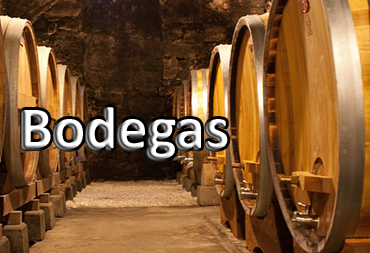
<style>
.page{position:relative;width:370px;height:253px}
.page>*{position:absolute;margin:0}
.t1{font:60px "Calibri-Bold";color:#ffffff}
</style>
<div class="page">
<p class="t1" style="left:23px;top:107px;width:205px;height:52px">Bodegas</p>
</div>
